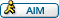
<style>
.page{position:relative;width:59px;height:18px;background:#ffffff}
.page>*{position:absolute;margin:0}
.t1{font:9.4px "Decker-Bold";letter-spacing:0.025em;color:#005c8b;scale:1.11 1}
</style>
<div class="page">
<p class="t1" style="left:26px;top:7px;width:18px;height:7px">AIM</p>
</div>
